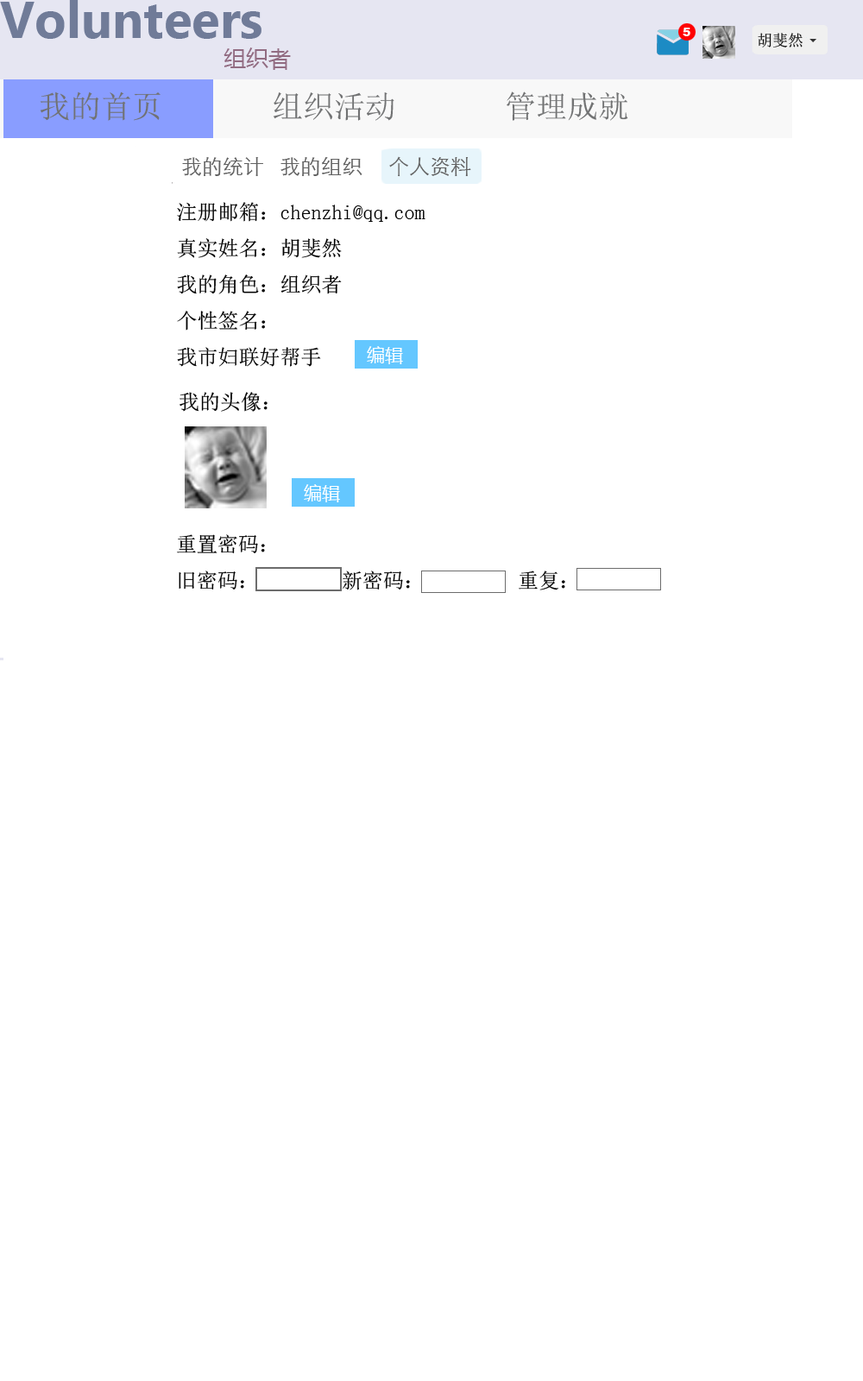
<style>
.page{position:relative;width:863px;height:1381px;background:#ffffff}
.page>*{position:absolute;margin:0}
.t1{font:12.1px "Arial-Black";color:#ffffff}
.t2{font:15.5px "SimSun";color:#141414}
.t3{font:22.4px "MicrosoftYaHei";color:#926c82}
.t4{font:31.1px "SimSun";color:#717273}
.t5{font:20.7px "STXihei";color:#626262}
.t6{font:20.7px "SimSun";color:#000000}
</style>
<div class="page">
<p class="t1" style="left:683px;top:28px;width:8px;height:8px">5</p>
<p class="t2" style="left:758px;top:33px;width:45px;height:14px">胡斐然</p>
<p class="t3" style="left:224px;top:47px;width:67px;height:23px">组织者</p>
<p class="t4" style="left:40px;top:92px;width:588px;height:29px">我的首页       组织活动       管理成就</p>
<p class="t5" style="left:182px;top:156px;width:289px;height:21px">我的统计   我的组织     个人资料</p>
<p class="t6" style="left:177px;top:202px;width:249px;height:165px">注册邮箱：chenzhi@qq.com<br>真实姓名：胡斐然<br>我的角色：组织者<br>个性签名：<br>我市妇联好帮手</p>
<p class="t6" style="left:180px;top:392px;width:88px;height:20px">我的头像：</p>
<p class="t6" style="left:177px;top:534px;width:388px;height:56px">重置密码：<br>旧密码：        新密码：         重复：</p>
</div>
